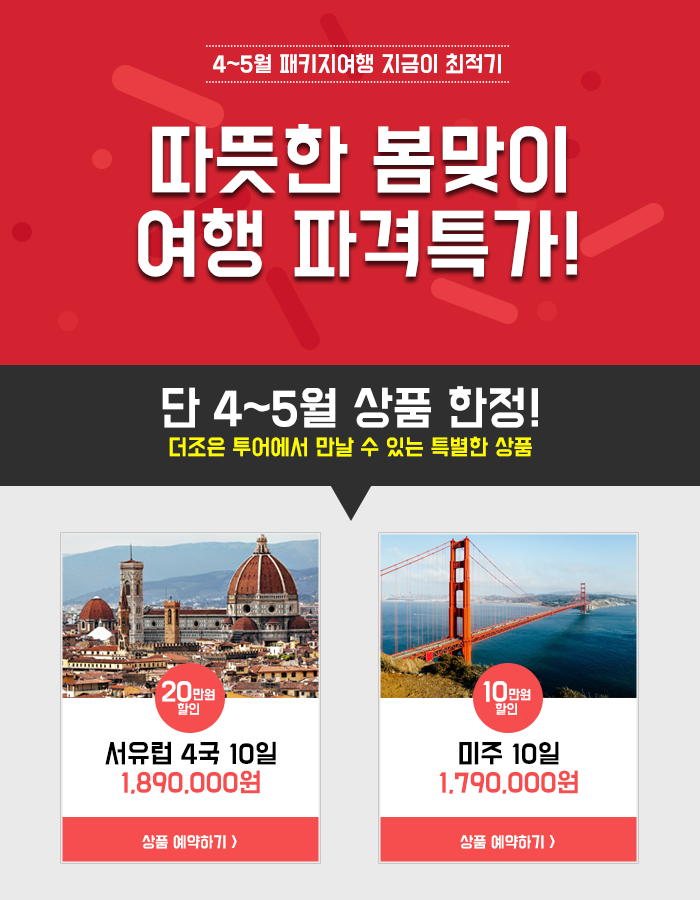
<style>
.page{position:relative;width:700px;height:900px;background:#d32330}
.page>*{position:absolute;margin:0}
.t1{font:20px "BMDoHyeon";color:#ffffff}
.t2{font:70px "BMDoHyeon";color:#ffffff}
.t3{font:42px "BMDoHyeon";color:#ffffff}
.t4{font:20px "BMDoHyeon";color:#fffc00}
.t5{font:12px "BMDoHyeon";color:#ffffff}
.t6{font:24px "BMDoHyeon";color:#ffffff}
.t7{font:24px "BMDoHyeon";color:#000000}
.t8{font:24px "BMDoHyeon";color:#f64e4e}
.t9{font:14px "BMDoHyeon";color:#ffffff}
</style>
<div class="page">
<p class="t1" style="left:213px;top:53px;width:288px;height:21px">4~5월 패키지여행 지금이 최적기</p>
<p class="t2" style="left:138px;top:124px;width:439px;height:153px;text-align:center">따뜻한 봄맞이<br>여행 파격특가!</p>
<p class="t3" style="left:162px;top:386px;width:376px;height:42px">단 4~5월 상품 한정!</p>
<p class="t4" style="left:169px;top:436px;width:363px;height:21px">더조은 투어에서 만날 수 있는 특별한 상품</p>
<p class="t5" style="left:162px;top:680px;width:53px;height:35px;text-align:center"><span class="t6">20</span>만원<br>할인</p>
<p class="t5" style="left:483px;top:681px;width:48px;height:34px;text-align:center"><span class="t6">10</span>만원<br>할인</p>
<p class="t7" style="left:105px;top:741px;width:171px;height:53px;text-align:center">서유럽 4국 10일<br><span class="t8">1,890,000원</span></p>
<p class="t8" style="left:439px;top:741px;width:139px;height:53px;text-align:center"><span class="t7">미주 10일<br></span>1,790,000원</p>
<p class="t9" style="left:142px;top:835px;width:95px;height:14px">상품 예약하기 &gt;</p>
<p class="t9" style="left:460px;top:834px;width:95px;height:15px">상품 예약하기 &gt;</p>
</div>
